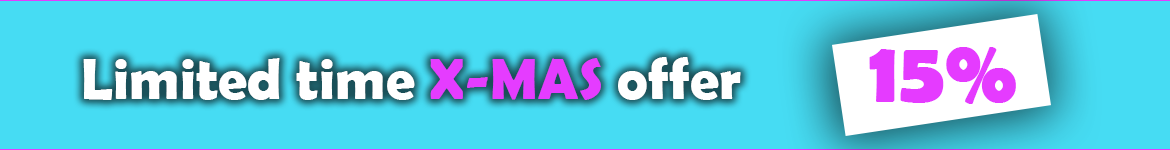
<style>
.page{position:relative;width:1170px;height:150px;background:#46dcf3}
.page>*{position:absolute;margin:0}
.t1{font:86.6px "BerlinSansFBDemi-Bold";color:#e53bff;font-weight:bold}
.t2{font:58.4px "BerlinSansFBDemi-Bold";color:#ffffff}
.t3{font:58.4px "BerlinSansFBDemi-Bold";color:#e53cff}
</style>
<div class="page">
<p class="t1" style="left:869px;top:47px;width:147px;height:57px">15%</p>
<p class="t2" style="left:83px;top:57px;width:658px;height:43px">Limited time <span class="t3">X-MAS</span> offer</p>
</div>
